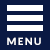
<style>
.page{position:relative;width:50px;height:50px;background:#0a1943}
.page>*{position:absolute;margin:0}
.t1{font:10px "Lato-Black";letter-spacing:0.16em;color:#ffffff}
</style>
<div class="page">
<p class="t1" style="left:7px;top:37px;width:34px;height:8px">MENU</p>
</div>
